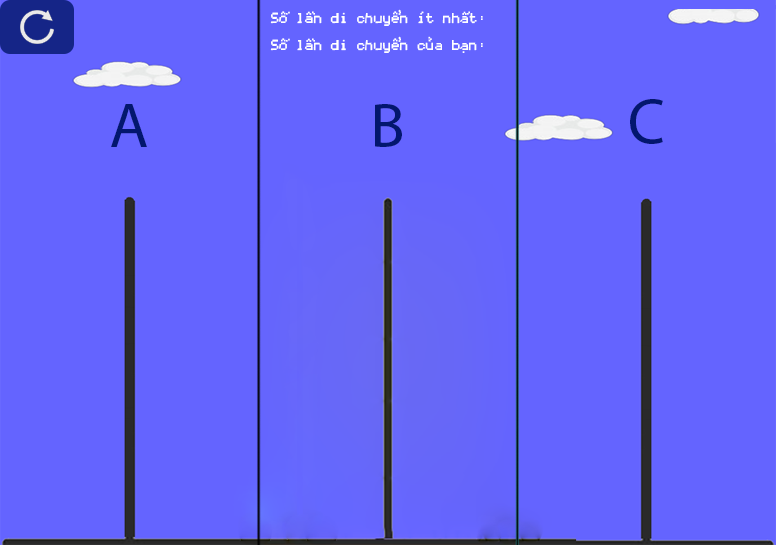
<style>
.page{position:relative;width:776px;height:545px;background:#6464ff}
.page>*{position:absolute;margin:0}
.t1{font:22.7px "SVN-Coder'sCrux";color:#ffffff}
</style>
<div class="page">
<p class="t1" style="left:270px;top:9px;width:213px;height:44px;text-align:center">Số lần di chuyển ít nhất:<br>Số lần di chuyển của bạn:</p>
</div>
